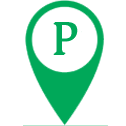
<style>
.page{position:relative;width:126px;height:126px;background:#ffffff}
.page>*{position:absolute;margin:0}
.t1{font:48.1px "CambriaMath";color:#00a859}
</style>
<div class="page">
<p class="t1" style="left:53px;top:23px;width:24px;height:32px">P</p>
<p class="t1" style="left:54px;top:22px;width:24px;height:32px">P</p>
</div>
